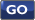
<style>
.page{position:relative;width:35px;height:20px}
.page>*{position:absolute;margin:0}
.t1{font:13px "GillSans-Bold";color:#ffffff}
</style>
<div class="page">
<p class="t1" style="left:6px;top:5px;width:22px;height:10px">GO</p>
</div>
